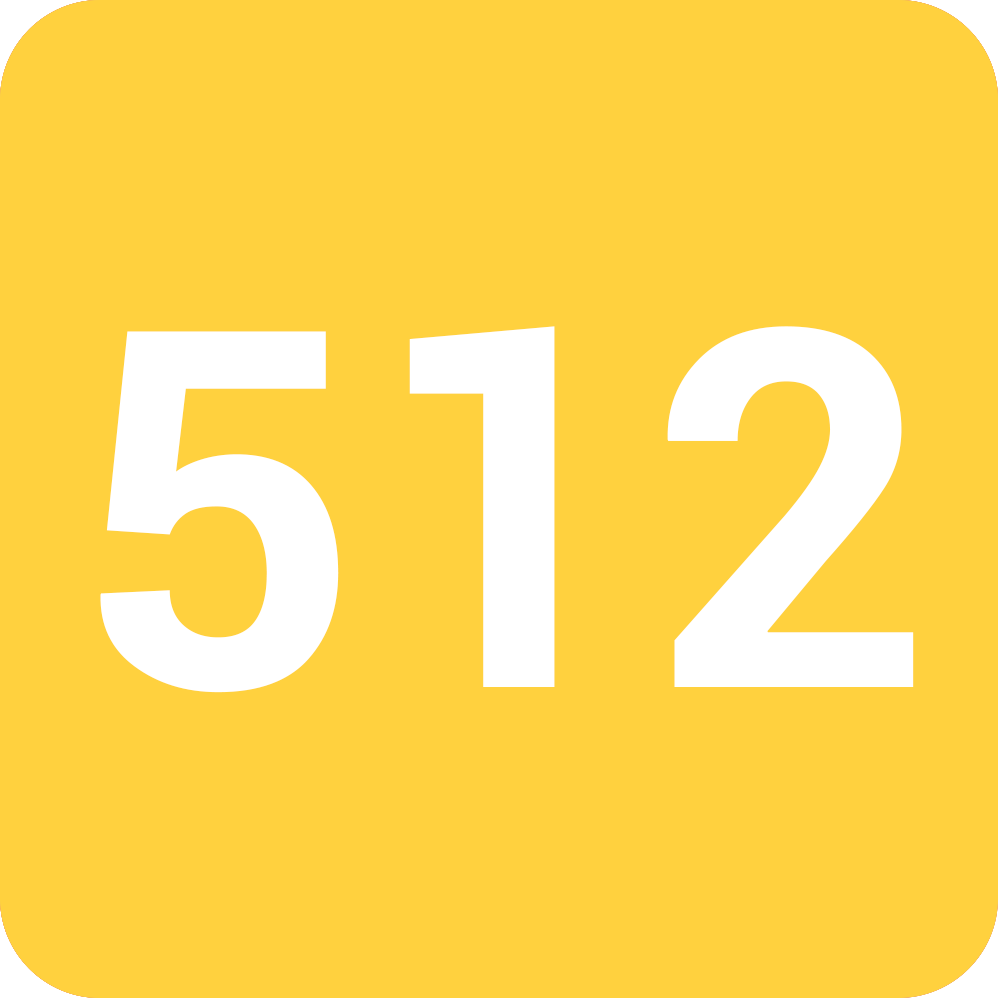
<style>
.page{position:relative;width:998px;height:998px;background:#ffd13e}
.page>*{position:absolute;margin:0}
.t1{font:500px "Roboto-Bold";color:#ffffff}
</style>
<div class="page">
<p class="t1" style="left:100px;top:326px;width:814px;height:367px">512</p>
</div>
